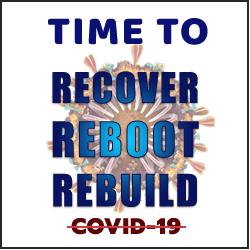
<style>
.page{position:relative;width:250px;height:250px;background:#ffffff}
.page>*{position:absolute;margin:0}
.t1{font:41.1px "Baloo-Regular";letter-spacing:0.05em;color:#0b1075}
.t2{font:39.1px "Impact";letter-spacing:0.05em}
.t3{font:45.1px "Impact";letter-spacing:0.05em}
.t4{font:41.1px "Impact";letter-spacing:0.05em}
.t5{font:22.1px "Prompt-ExtraBold";letter-spacing:0.05em;color:#5d0406}
</style>
<div class="page">
<p class="t1" style="left:48px;top:18px;width:160px;height:27px">TIME TO</p>
<p class="t2" style="left:52px;top:71px;width:147px;height:136px;text-align:center">RECOVER<br><span class="t3">REBOOT<br></span><span class="t4">REBUILD</span></p>
<p class="t5" style="left:71px;top:218px;width:110px;height:17px">COVID-19</p>
</div>
